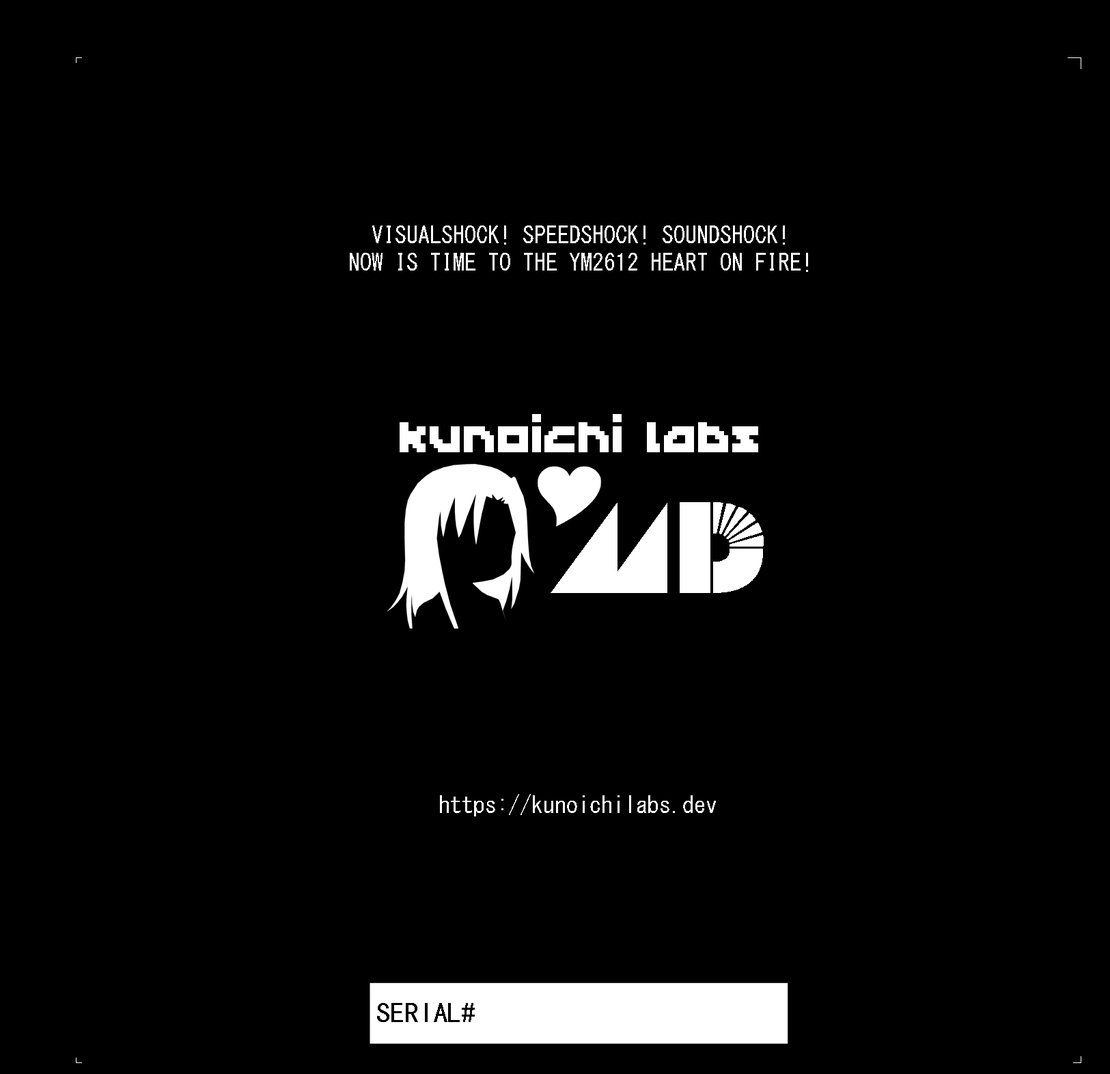
<style>
.page{position:relative;width:1110px;height:1074px;background:#000000}
.page>*{position:absolute;margin:0}
.t1{font:22.8px "MS-Gothic";color:#ffffff}
.t2{font:68.3px "Kapel";color:#ffffff}
.t3{font:122.4px "NiseMegaDrive";color:#ffffff}
.t4{font:28.5px "MS-Gothic";color:#000000}
</style>
<div class="page">
<p class="t1" style="left:350px;top:225px;width:458px;height:47px;text-align:center">VISUALSHOCK! SPEEDSHOCK! SOUNDSHOCK!<br>NOW IS TIME TO THE YM2612 HEART ON FIRE!</p>
<p class="t2" style="left:400px;top:414px;width:358px;height:38px">kunoichi labs</p>
<p class="t3" style="left:551px;top:502px;width:213px;height:91px">`</p>
<p class="t1" style="left:440px;top:794px;width:276px;height:22px">https://kunoichilabs.dev</p>
<p class="t4" style="left:377px;top:1003px;width:98px;height:19px">SERIAL#</p>
</div>
